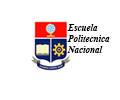
<style>
.page{position:relative;width:120px;height:100px;background:#ffffff}
.page>*{position:absolute;margin:0}
.t1{font:9px "TimesNewRomanPS-BoldItalicMT";color:#000000}
</style>
<div class="page">
<p class="t1" style="left:67px;top:24px;width:43px;height:29px">Escuela<br>Politecnica<br>Nacional</p>
</div>
